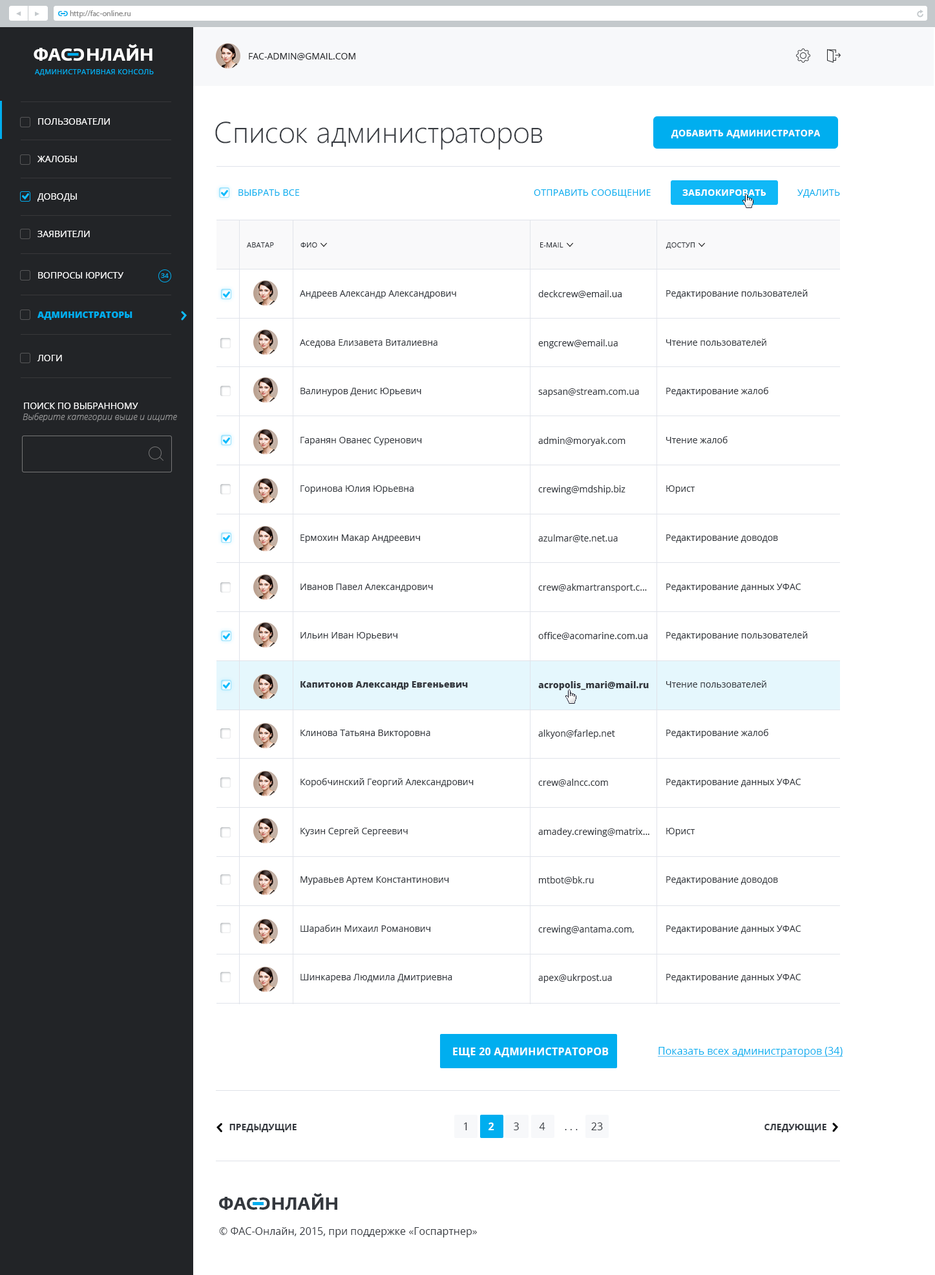
<style>
.page{position:relative;width:935px;height:1275px;background:#ffffff}
.page>*{position:absolute;margin:0}
.t1{font:6.5px "FedraSansPro-Bold";color:#00aeef;text-transform:uppercase}
.t2{font:7.8px "MyriadPro-Regular";color:#8d8d8d}
.t3{font:17.4px "FedraSansPro-Bold";color:#ffffff;text-transform:uppercase}
.t4{font:9px "OpenSans";color:#222427;text-transform:uppercase}
.t5{font:7.1px "OpenSans";letter-spacing:0.03em;color:#00aeef;text-transform:uppercase}
.t6{font:9px "OpenSans";color:#ffffff;text-transform:uppercase}
.t7{font:29.7px "SegoeUI-Light";color:#34383e}
.t8{font:9px "OpenSans-Bold";letter-spacing:0.03em;color:#fefefe;text-transform:uppercase}
.t9{font:9px "OpenSans";letter-spacing:0.02em;color:#00aeef;text-transform:uppercase}
.t10{font:9px "OpenSans-Bold";letter-spacing:0.02em;color:#ffffff;text-transform:uppercase}
.t11{font:7.1px "OpenSans";letter-spacing:0.02em;color:#34383e;text-transform:uppercase}
.t12{font:6.5px "OpenSans";color:#00aeef}
.t13{font:9px "OpenSans";color:#34383e}
.t14{font:9px "OpenSans-Extrabold";color:#34383e}
.t15{font:9px "OpenSans-Extrabold";color:#00aeef;text-transform:uppercase}
.t16{font:9px "OpenSansLight-Italic";color:#959596}
.t17{font:10.3px "OpenSans-Bold";letter-spacing:0.02em;color:#ffffff;text-transform:uppercase}
.t18{font:10.3px "OpenSans";color:#00aeef;text-decoration:underline}
.t19{font:9px "OpenSans-Bold";color:#34383e;text-transform:uppercase}
.t20{font:10.3px "OpenSans";color:#34383e}
.t21{font:10.3px "OpenSans-Bold";color:#ffffff}
.t22{font:17.4px "FedraSansPro-Bold";color:#34383e;text-transform:uppercase}
</style>
<div class="page">
<p class="t1" style="left:58px;top:11px;width:5px;height:5px">c</p>
<p class="t1" style="left:63px;top:11px;width:5px;height:5px;rotate:180deg">c</p>
<p class="t2" style="left:70px;top:10px;width:61px;height:8px">http://fac-online.ru</p>
<p class="t3" style="left:34px;top:44px;width:119px;height:17px">ФАc   НЛАЙН</p>
<p class="t3" style="left:73px;top:48px;width:11px;height:13px;rotate:180deg">c</p>
<p class="t4" style="left:249px;top:53px;width:106px;height:7px">FAC-Admin@gmail.com</p>
<p class="t5" style="left:35px;top:69px;width:119px;height:7px">Административная консоль</p>
<p class="t6" style="left:38px;top:118px;width:72px;height:7px">Пользователи</p>
<p class="t7" style="left:215px;top:122px;width:328px;height:28px">Список администраторов</p>
<p class="t8" style="left:671px;top:129px;width:149px;height:10px">добавить администратора</p>
<p class="t6" style="left:37px;top:156px;width:40px;height:6px">жалобы</p>
<p class="t6" style="left:37px;top:193px;width:40px;height:9px">Доводы</p>
<p class="t9" style="left:238px;top:189px;width:61px;height:7px">Выбрать все</p>
<p class="t9" style="left:534px;top:189px;width:117px;height:9px">Отправить Сообщение</p>
<p class="t10" style="left:682px;top:189px;width:84px;height:7px">ЗАблокировать</p>
<p class="t9" style="left:798px;top:189px;width:42px;height:9px">Удалить</p>
<p class="t6" style="left:37px;top:231px;width:53px;height:6px">ЗАявители</p>
<p class="t11" style="left:247px;top:242px;width:27px;height:6px">аватар</p>
<p class="t11" style="left:301px;top:242px;width:16px;height:6px">ФИО</p>
<p class="t11" style="left:540px;top:242px;width:24px;height:6px">E-mail</p>
<p class="t11" style="left:666px;top:242px;width:29px;height:7px">Доступ</p>
<p class="t6" style="left:38px;top:272px;width:85px;height:7px">вопросы юристу</p>
<p class="t12" style="left:161px;top:273px;width:8px;height:5px">34</p>
<p class="t13" style="left:300px;top:290px;width:174px;height:692px">Андреев Александр Александрович<br>Аседова Елизавета Виталиевна<br>Валинуров Денис Юрьевич<br>Гаранян Ованес Суренович<br>Горинова Юлия Юрьевна<br>Ермохин Макар Андреевич<br>Иванов Павел Александрович<br>Ильин Иван Юрьевич<br><span class="t14">Капитонов Александр Евгеньевич<br></span>Клинова Татьяна Викторовна<br>Коробчинский Георгий Александрович<br>Кузин Сергей Сергеевич<br>Муравьев Артем Константинович<br>Шарабин Михаил Романович<br>Шинкарева Людмила Дмитриевна</p>
<p class="t13" style="left:538px;top:290px;width:112px;height:693px">deckcrew@email.ua<br>engcrew@email.ua<br>sapsan@stream.com.ua<br>admin@moryak.com<br>crewing@mdship.biz<br>azulmar@te.net.ua <br>crew@akmartransport.c...<br>office@acomarine.com.ua<br><span class="t14">acropolis_mari@mail.ru<br></span>alkyon@farlep.net<br>crew@alncc.com<br>amadey.crewing@matrix...<br>mtbot@bk.ru<br>crewing@antama.com,<br>apex@ukrpost.ua</p>
<p class="t13" style="left:666px;top:290px;width:142px;height:692px">Редактирование пользователей<br>Чтение пользователей<br>Редактирование жалоб<br>Чтение жалоб<br>Юрист<br>Редактирование доводов<br>Редактирование данных УФАС<br>Редактирование пользователей<br>Чтение пользователей<br>Редактирование жалоб<br>Редактирование данных УФАС<br>Юрист<br>Редактирование доводов<br>Редактирование данных УФАС<br>Редактирование данных УФАС</p>
<p class="t15" style="left:37px;top:312px;width:95px;height:8px">Администраторы</p>
<p class="t6" style="left:37px;top:355px;width:25px;height:6px">ЛОги</p>
<p class="t16" style="left:23px;top:413px;width:154px;height:9px">Выберите категории выше и ищите</p>
<p class="t6" style="left:24px;top:403px;width:114px;height:6px">Поиск по выбранному</p>
<p class="t17" style="left:453px;top:1048px;width:156px;height:9px">еще 20 администраторов</p>
<p class="t18" style="left:658px;top:1047px;width:185px;height:10px">Показать всех администраторов (34)</p>
<p class="t19" style="left:229px;top:1124px;width:68px;height:8px">Предыдущие</p>
<p class="t20" style="left:464px;top:1123px;width:3px;height:7px">1</p>
<p class="t21" style="left:489px;top:1123px;width:5px;height:7px">2</p>
<p class="t20" style="left:514px;top:1123px;width:5px;height:7px">3</p>
<p class="t20" style="left:539px;top:1123px;width:6px;height:7px">4</p>
<p class="t20" style="left:565px;top:1129px;width:13px;height:1px">. . .</p>
<p class="t20" style="left:591px;top:1123px;width:12px;height:7px">23</p>
<p class="t19" style="left:765px;top:1124px;width:62px;height:8px">Следующие</p>
<p class="t22" style="left:219px;top:1193px;width:118px;height:17px">ФАc   НЛАЙН</p>
<p class="t22" style="left:259px;top:1198px;width:11px;height:12px;rotate:180deg">c</p>
<p class="t20" style="left:219px;top:1227px;width:258px;height:11px">© ФАС-Онлайн, 2015, при поддержке «Госпартнер»</p>
</div>
